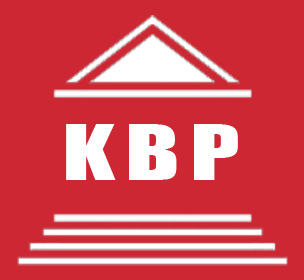
<style>
.page{position:relative;width:304px;height:280px;background:#cd2733}
.page>*{position:absolute;margin:0}
.t1{font:71.3px "Impact";letter-spacing:0.1em;color:#ffffff;scale:1.39 1}
</style>
<div class="page">
<p class="t1" style="left:66px;top:124px;width:172px;height:56px">KBP</p>
</div>
